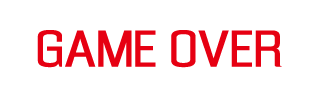
<style>
.page{position:relative;width:320px;height:100px;background:#ffffff}
.page>*{position:absolute;margin:0}
.t1{font:48px "Enigmatic";color:#e60012}
</style>
<div class="page">
<p class="t1" style="left:37px;top:30px;width:245px;height:38px">GAME OVER</p>
</div>
